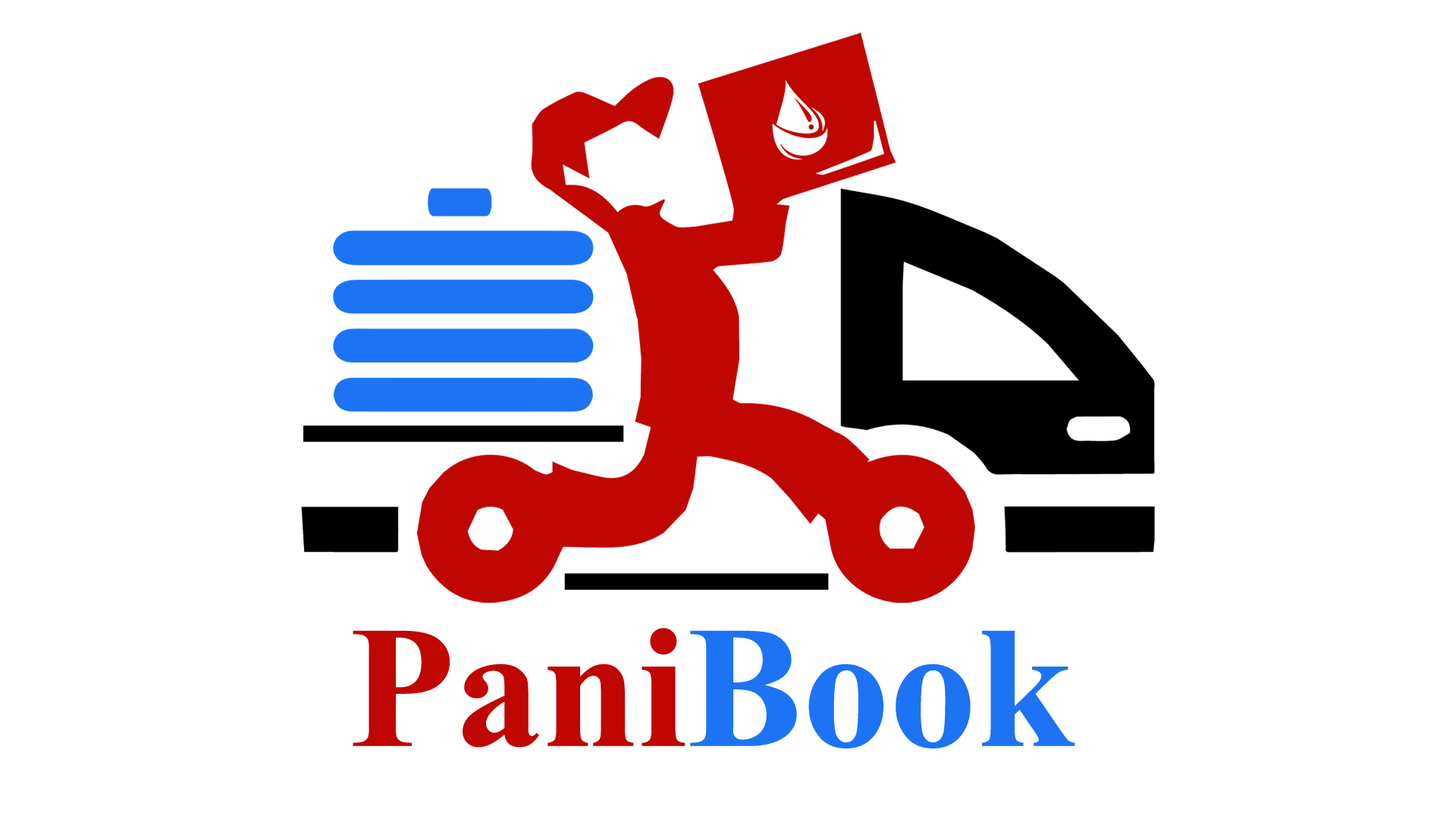
<style>
.page{position:relative;width:1456px;height:819px;background:#ffffff}
.page>*{position:absolute;margin:0}
.t1{font:173.8px "TimesNewRomanPS-BoldMT";color:#bf0603}
.t2{font:173.8px "TimesNewRomanPS-BoldMT";color:#1c73f4}
</style>
<div class="page">
<p class="t1" style="left:353px;top:628px;width:722px;height:120px">Pani<span class="t2">Book</span></p>
</div>
